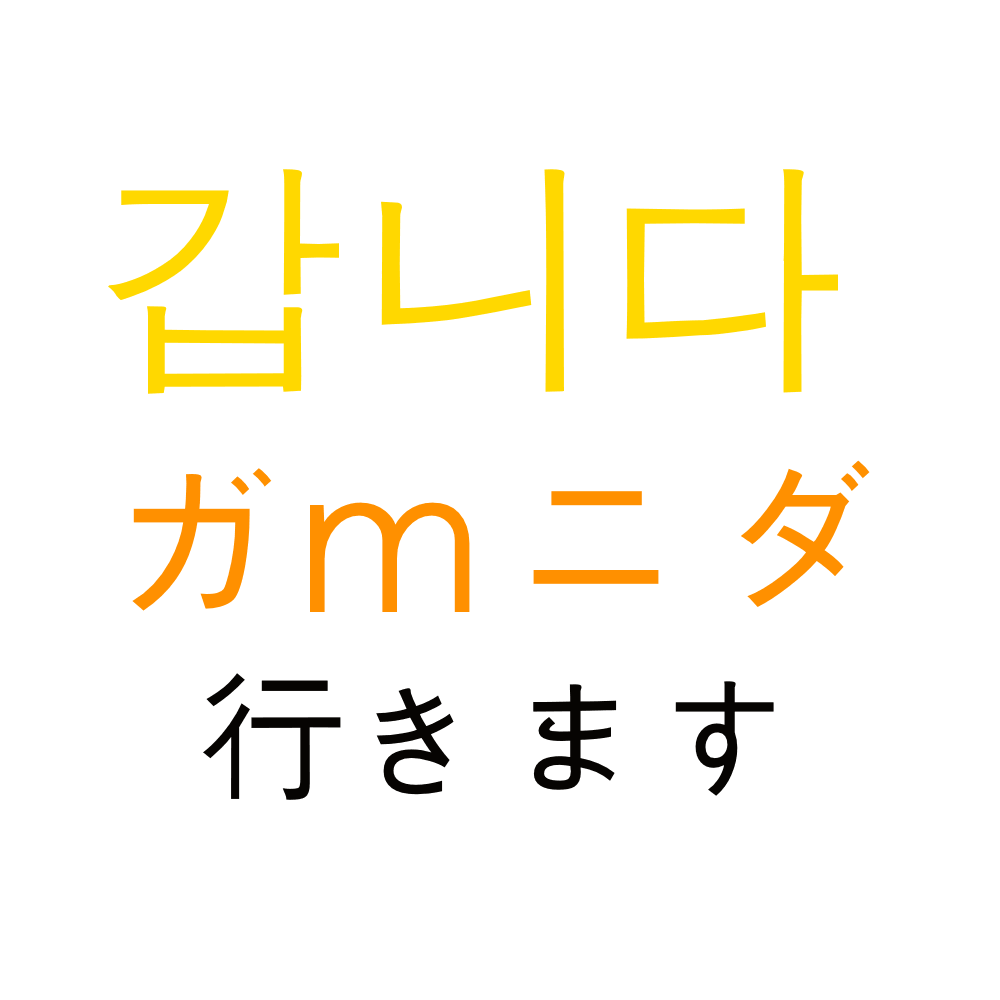
<style>
.page{position:relative;width:1000px;height:1000px;background:#ffffff}
.page>*{position:absolute;margin:0}
.t1{font:200px "AppleGothic";color:#ff9000}
.t2{font:250px "AppleGothic";color:#ffd800}
.t3{font:150px "AppleGothic";color:#060402}
</style>
<div class="page">
<p class="t1" style="left:108px;top:169px;width:762px;height:631px"><span class="t2">갑니다<br></span>ガm ニダ<br> <span class="t3"> 行きます</span></p>
</div>
